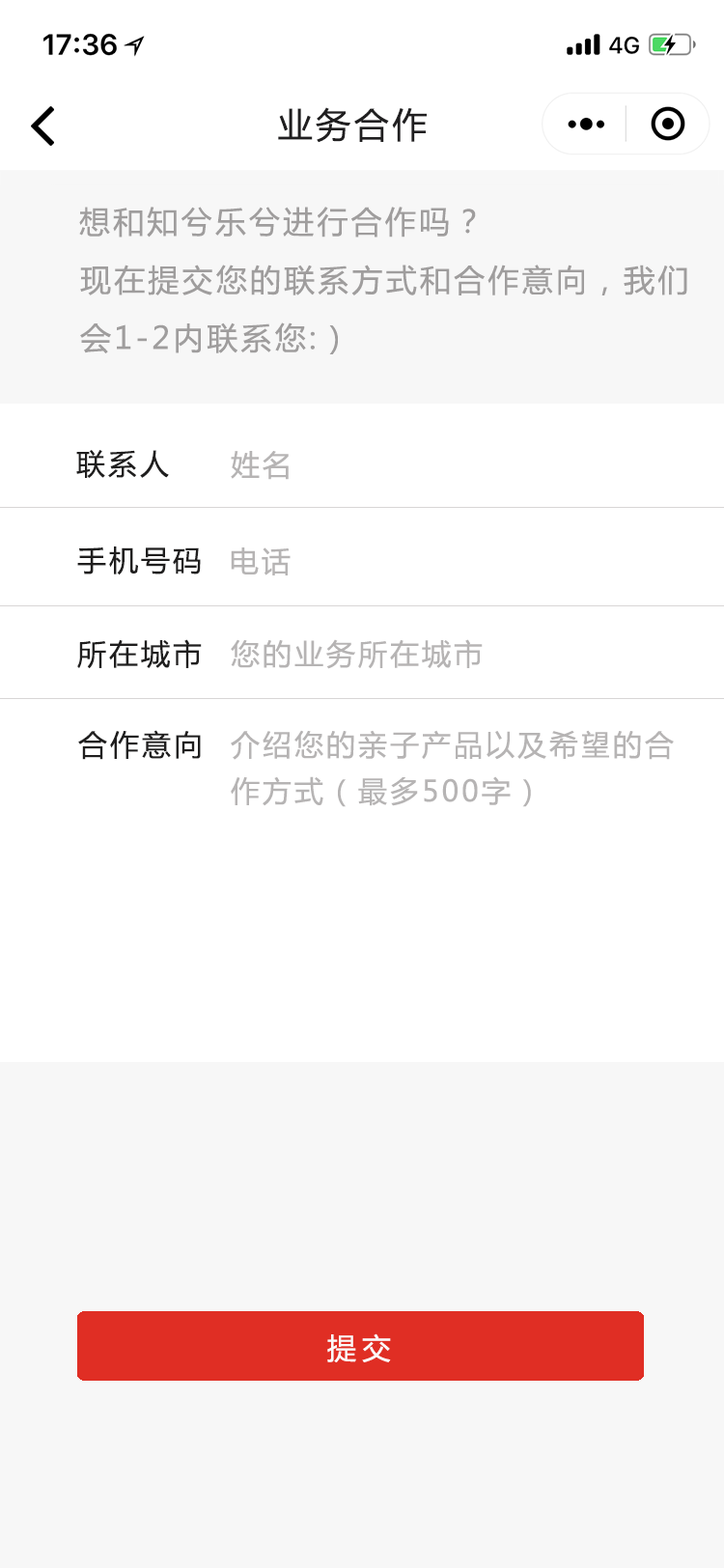
<style>
.page{position:relative;width:724px;height:1568px;background:#ffffff}
.page>*{position:absolute;margin:0}
.t1{font:34.8px "MicrosoftYaHei";letter-spacing:0.1em;color:#201f20}
.t2{font:30.9px "MicrosoftYaHei";letter-spacing:0.1em;color:#9f9d9d}
.t3{font:30.9px/57.9px "MicrosoftYaHei";letter-spacing:0.1em;color:#9f9d9d}
.t4{font:29px "MicrosoftYaHei";letter-spacing:0.1em;color:#1f1e1e}
.t5{font:29px "MicrosoftYaHei";letter-spacing:0.1em;color:#b6b4b4}
.t6{font:29px/46.3px "MicrosoftYaHei";letter-spacing:0.1em;color:#b6b4b4}
.t7{font:29px "MicrosoftYaHei";letter-spacing:0.2em;color:#fcf8f8}
</style>
<div class="page">
<p class="t1" style="left:278px;top:107px;width:149px;height:36px">业务合作</p>
<p class="t2" style="left:79px;top:207px;width:397px;height:31px">想和知兮乐兮进行合作吗？</p>
<p class="t3" style="left:80px;top:265px;width:607px;height:89px">现在提交您的联系方式和合作意向，我们<br>会1-2内联系您:）</p>
<p class="t4" style="left:76px;top:450px;width:93px;height:28px">联系人</p>
<p class="t5" style="left:231px;top:451px;width:58px;height:29px">姓名</p>
<p class="t4" style="left:77px;top:546px;width:124px;height:29px">手机号码</p>
<p class="t5" style="left:231px;top:547px;width:60px;height:28px">电话</p>
<p class="t4" style="left:77px;top:639px;width:125px;height:30px">所在城市</p>
<p class="t5" style="left:231px;top:639px;width:252px;height:30px">您的业务所在城市</p>
<p class="t4" style="left:78px;top:730px;width:123px;height:30px">合作意向</p>
<p class="t6" style="left:231px;top:730px;width:443px;height:77px">介绍您的亲子产品以及希望的合<br>作方式（最多500字）</p>
<p class="t7" style="left:327px;top:1333px;width:64px;height:29px">提交</p>
</div>
